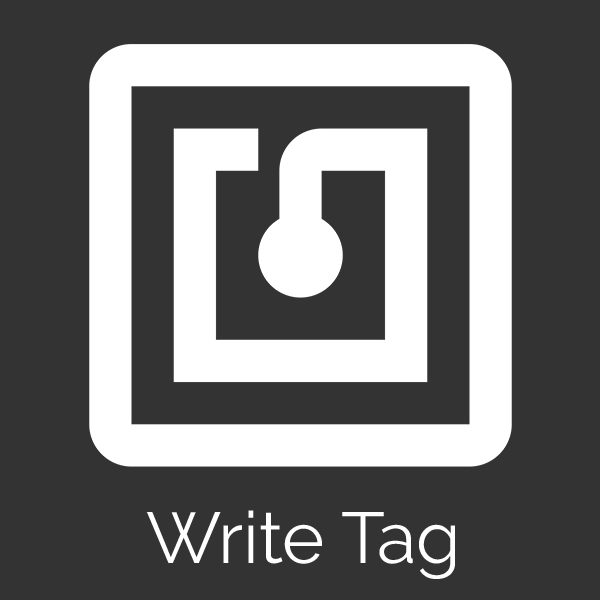
<style>
.page{position:relative;width:600px;height:600px;background:#333333}
.page>*{position:absolute;margin:0}
.t1{font:72px "Raleway-Regular";color:#ffffff}
</style>
<div class="page">
<p class="t1" style="left:146px;top:510px;width:309px;height:69px">Write Tag</p>
</div>
